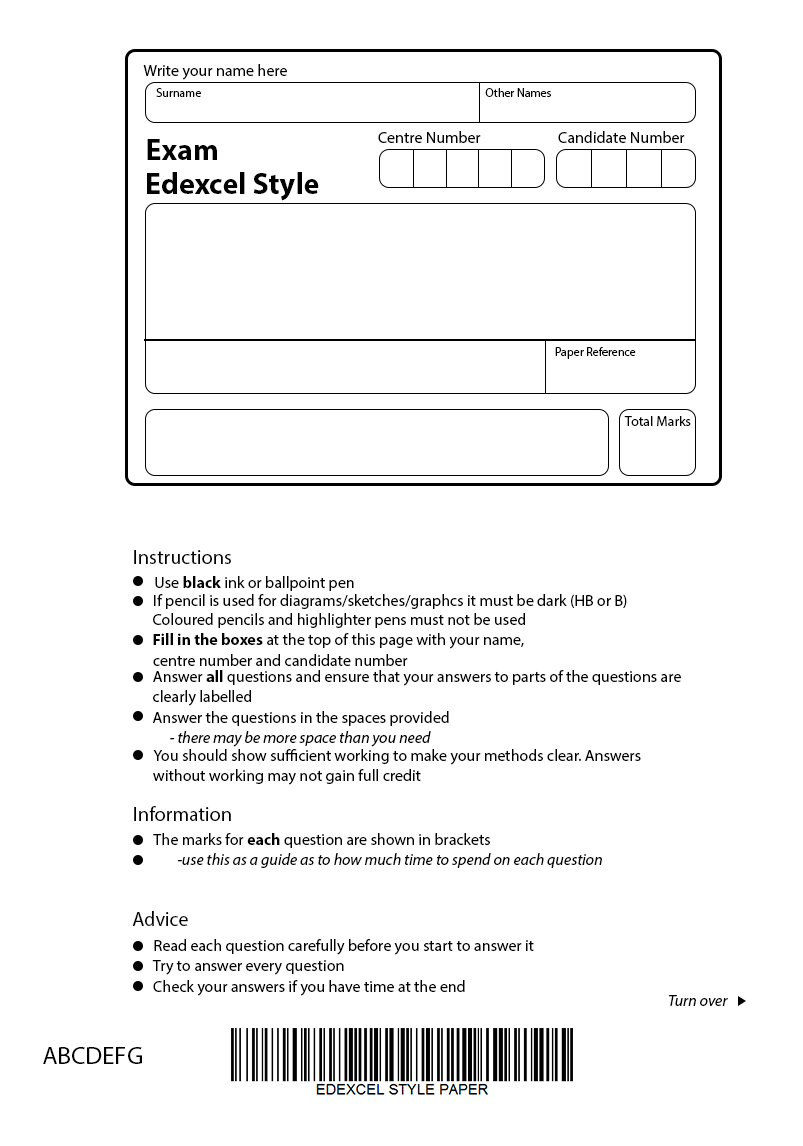
<style>
.page{position:relative;width:803px;height:1146px;background:#ffffff}
.page>*{position:absolute;margin:0}
.t1{font:16px "MyriadPro-Regular";color:#000000}
.t2{font:12px "MyriadPro-Regular";color:#000000}
.t3{font:30px "MyriadPro-Bold";color:#000000}
.t4{font:14px "MyriadPro-Regular";color:#000000}
.t5{font:20px "MyriadPro-Regular";color:#000000}
.t6{font:16px "MyriadPro-Bold";color:#000000}
.t7{font:16px "MyriadPro-It";color:#000000}
.t8{font:25px "MyriadPro-Regular";color:#000000}
</style>
<div class="page">
<p class="t1" style="left:143px;top:64px;width:144px;height:16px">Write your name here</p>
<p class="t2" style="left:156px;top:88px;width:45px;height:9px">Surname</p>
<p class="t2" style="left:485px;top:88px;width:66px;height:9px">Other Names</p>
<p class="t1" style="left:378px;top:131px;width:103px;height:12px">Centre Number</p>
<p class="t1" style="left:558px;top:131px;width:127px;height:12px">Candidate Number</p>
<p class="t3" style="left:147px;top:139px;width:70px;height:21px">Exam</p>
<p class="t3" style="left:147px;top:172px;width:172px;height:29px">Edexcel Style</p>
<p class="t2" style="left:555px;top:347px;width:81px;height:12px">Paper Reference</p>
<p class="t4" style="left:624px;top:416px;width:67px;height:10px">Total Marks</p>
<p class="t5" style="left:134px;top:550px;width:97px;height:14px">Instructions</p>
<p class="t1" style="left:155px;top:576px;width:199px;height:15px">Use <span class="t6">black</span> ink or ballpoint pen</p>
<p class="t1" style="left:154px;top:594px;width:473px;height:15px">If pencil is used for diagrams/sketches/graphcs it must be dark (HB or B)</p>
<p class="t1" style="left:153px;top:613px;width:372px;height:15px">Coloured pencils and highlighter pens must not be used</p>
<p class="t1" style="left:153px;top:633px;width:371px;height:16px"><span class="t6">Fill in the boxes</span> at the top of this page with your name,</p>
<p class="t1" style="left:153px;top:654px;width:255px;height:12px">centre number and candidate number</p>
<p class="t1" style="left:153px;top:670px;width:528px;height:16px">Answer <span class="t6">all</span> questions and ensure that your answers to parts of the questions are</p>
<p class="t1" style="left:153px;top:690px;width:98px;height:16px">clearly labelled</p>
<p class="t1" style="left:152px;top:711px;width:297px;height:15px">Answer the questions in the spaces provided</p>
<p class="t7" style="left:170px;top:731px;width:261px;height:16px">- there may be more space than you need</p>
<p class="t1" style="left:153px;top:749px;width:488px;height:16px">You should show sufficient working to make your methods clear. Answers</p>
<p class="t1" style="left:153px;top:769px;width:268px;height:16px">without working may not gain full credit</p>
<p class="t5" style="left:134px;top:806px;width:97px;height:15px">Information</p>
<p class="t1" style="left:153px;top:833px;width:337px;height:15px">The marks for <span class="t6">each</span> question are shown in brackets</p>
<p class="t7" style="left:177px;top:853px;width:425px;height:15px">-use this as a guide as to how much time to spend on each question</p>
<p class="t5" style="left:132px;top:911px;width:56px;height:15px">Advice</p>
<p class="t1" style="left:154px;top:939px;width:380px;height:16px">Read each question carefully before you start to answer it</p>
<p class="t1" style="left:152px;top:960px;width:192px;height:15px">Try to answer every question</p>
<p class="t1" style="left:153px;top:980px;width:312px;height:16px">Check your answers if you have time at the end</p>
<p class="t7" style="left:669px;top:995px;width:59px;height:11px">Turn over</p>
<p class="t8" style="left:43px;top:1047px;width:99px;height:17px">ABCDEFG</p>
</div>
